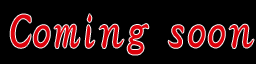
<style>
.page{position:relative;width:256px;height:64px;background:#000000}
.page>*{position:absolute;margin:0}
.t1{font:48px "HGSGyoshotai";letter-spacing:0.005em;color:#dc010b}
</style>
<div class="page">
<p class="t1" style="left:10px;top:14px;width:244px;height:41px">Coming soon</p>
</div>
